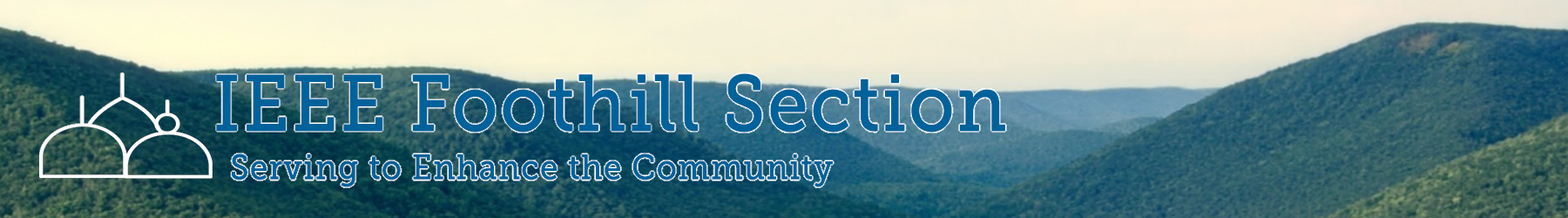
<style>
.page{position:relative;width:1568px;height:218px}
.page>*{position:absolute;margin:0}
.t1{font:79px "MuseoSlab-500";letter-spacing:0.01em;color:#00629b;font-weight:bold;scale:0.92 1}
.t2{font:34.8px "MuseoSlab-500";letter-spacing:0.01em;color:#00629b;font-weight:bold;scale:0.92 1}
</style>
<div class="page">
<p class="t1" style="left:216px;top:73px;width:789px;height:59px">IEEE Foothill Section</p>
<p class="t2" style="left:232px;top:153px;width:601px;height:34px">Serving to Enhance the Community</p>
</div>
